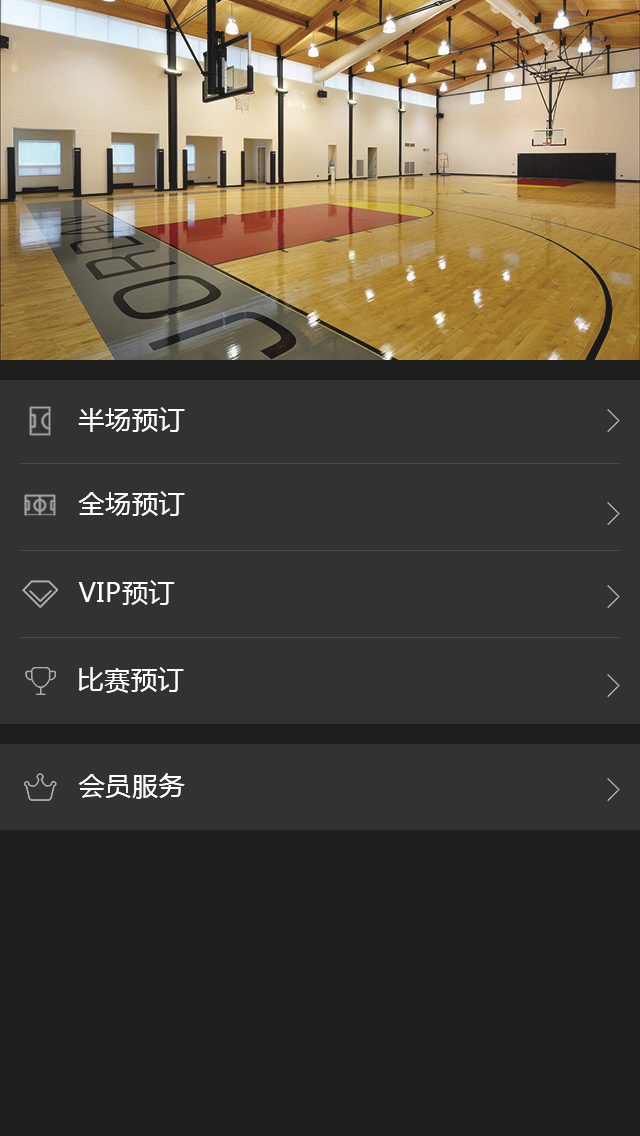
<style>
.page{position:relative;width:640px;height:1136px;background:#323232}
.page>*{position:absolute;margin:0}
.t1{font:26px "MicrosoftYaHei";letter-spacing:0.03em;color:#ffffff}
</style>
<div class="page">
<p class="t1" style="left:78px;top:407px;width:107px;height:25px">半场预订</p>
<p class="t1" style="left:78px;top:491px;width:107px;height:25px">全场预订</p>
<p class="t1" style="left:78px;top:580px;width:97px;height:25px">VIP预订</p>
<p class="t1" style="left:78px;top:667px;width:106px;height:26px">比赛预订</p>
<p class="t1" style="left:78px;top:773px;width:107px;height:26px">会员服务</p>
</div>
